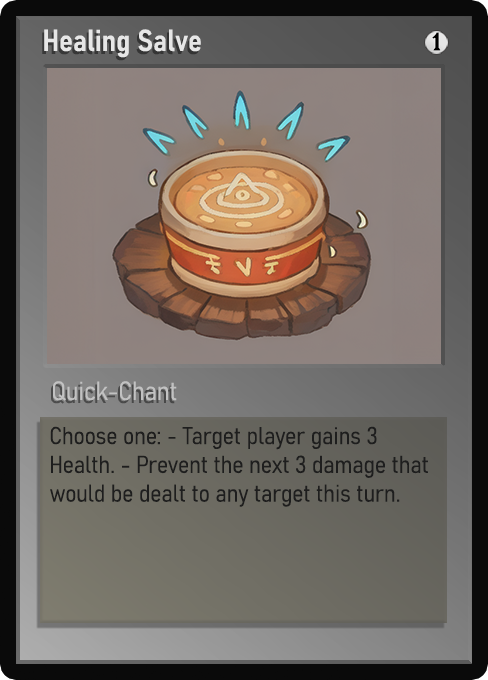
<style>
.page{position:relative;width:488px;height:680px}
.page>*{position:absolute;margin:0}
.t1{font:30px "Bahnschrift-SemiBoldSemiCondensed";color:#f2f2f2;font-weight:bold}
.t2{font:25px "WTRRoycroft";color:#000000;font-weight:bold;scale:1.09 1}
.t3{font:26px "Bahnschrift-LightSemiCondensed";color:#c8c8c8;font-weight:bold}
.t4{font:24px "Bahnschrift-LightSemiCondensed";color:#1e1e1e;font-weight:bold}
</style>
<div class="page">
<p class="t1" style="left:44px;top:29px;width:157px;height:29px;opacity:0.9">Healing Salve</p>
<p class="t2" style="left:432px;top:32px;width:9px;height:19px">1</p>
<p class="t3" style="left:53px;top:381px;width:124px;height:20px;opacity:0.9">Quick-Chant</p>
<p class="t4" style="left:50px;top:426px;width:378px;height:81px">Choose one: - Target player gains 3 Health. - Prevent the next 3 damage that would be dealt to any target this turn.</p>
</div>
